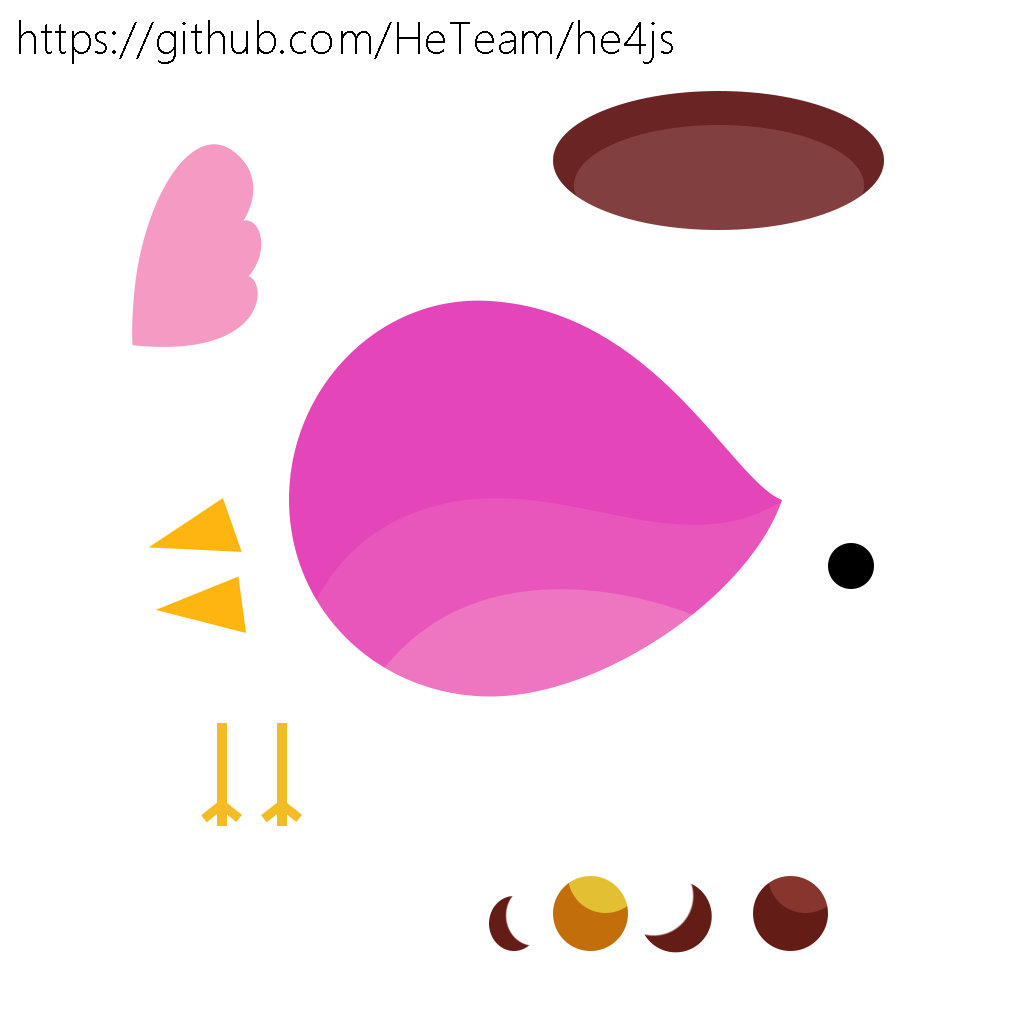
<style>
.page{position:relative;width:1024px;height:1024px;background:#ffffff}
.page>*{position:absolute;margin:0}
.t1{font:41.9px "MicrosoftYaHeiLight";color:#000000}
</style>
<div class="page">
<p class="t1" style="left:19px;top:20px;width:654px;height:44px">https://github.com/HeTeam/he4js</p>
</div>
